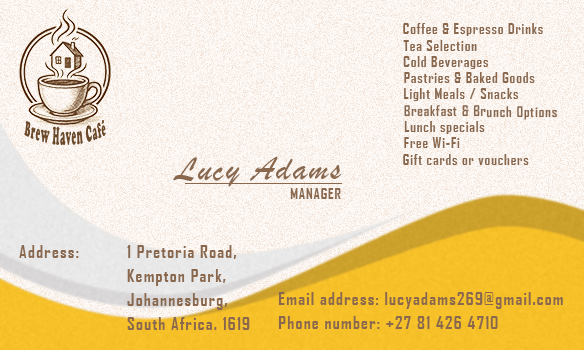
<style>
.page{position:relative;width:584px;height:350px;background:#fdfaf8}
.page>*{position:absolute;margin:0}
.t1{font:24px "AgencyFB-Bold";letter-spacing:0.06em;color:#89684d}
.t2{font:60px "BrushScriptMT";letter-spacing:0.06em;color:#89684d}
.t3{font:30px/24px "AgencyFB-Bold";letter-spacing:0.06em;color:#89684d}
.t4{font:30px "AgencyFB-Bold";letter-spacing:0.06em;color:#89684d}
</style>
<div class="page">
<p class="t1" style="left:403px;top:23px;width:140px;height:13px">Coffee &amp; Espresso Drinks</p>
<p class="t1" style="left:403px;top:40px;width:74px;height:11px">Tea Selection</p>
<p class="t1" style="left:403px;top:56px;width:86px;height:13px">Cold Beverages</p>
<p class="t1" style="left:404px;top:72px;width:131px;height:11px">Pastries &amp; Baked Goods</p>
<p class="t1" style="left:404px;top:88px;width:115px;height:13px">Light Meals / Snacks</p>
<p class="t1" style="left:404px;top:105px;width:153px;height:15px;rotate:1deg">Breakfast &amp; Brunch Options</p>
<p class="t1" style="left:404px;top:121px;width:81px;height:13px">Lunch specials</p>
<p class="t1" style="left:404px;top:137px;width:56px;height:11px">Free Wi-Fi</p>
<p class="t2" style="left:173px;top:156px;width:169px;height:31px">Lucy Adams</p>
<p class="t1" style="left:403px;top:154px;width:126px;height:11px">Gift cards or vouchers</p>
<p class="t1" style="left:290px;top:188px;width:51px;height:11px">MANAGER</p>
<p class="t3" style="left:19px;top:245px;width:231px;height:85px">Address:   1 Pretoria Road, <br>   Kempton Park, <br>   Johannesburg, <br>   South Africa. 1619</p>
<p class="t4" style="left:278px;top:292px;width:285px;height:17px">Email address: lucyadams269@gmail.com</p>
<p class="t4" style="left:278px;top:316px;width:220px;height:13px">Phone number: +27 81 426 4710</p>
</div>
